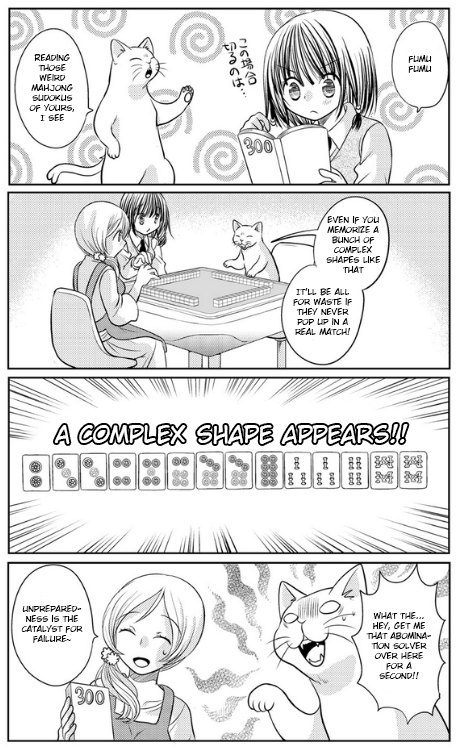
<style>
.page{position:relative;width:461px;height:751px;background:#ffffff}
.page>*{position:absolute;margin:0}
.t1{font:8.3px "WildWordsRoman";color:#000000}
.t2{font:23.3px "WildWordsRoman";color:#ffffff}
.t3{font:8.3px "TimesNewRomanPSMT";color:#000000}
</style>
<div class="page">
<p class="t1" style="left:29px;top:54px;width:46px;height:67px;text-align:center">Reading those weird mahjong sudokus of yours, I see</p>
<p class="t1" style="left:408px;top:55px;width:24px;height:18px;text-align:center">fumu fumu</p>
<p class="t1" style="left:326px;top:216px;width:54px;height:57px;text-align:center">Even if you memorize a bunch of complex shapes like that</p>
<p class="t1" style="left:293px;top:288px;width:59px;height:47px;text-align:center">It'll be all for waste if they never pop up in a real match!</p>
<p class="t2" style="left:54px;top:424px;width:354px;height:20px">A complex shape appears!!</p>
<p class="t1" style="left:21px;top:605px;width:62px;height:38px;text-align:center">Unpreparedness is the catalyst for failure<span class="t3">~</span></p>
<p class="t1" style="left:366px;top:612px;width:65px;height:67px;text-align:center">What the...<br>Hey, get me that abomination solver over here for a second!!</p>
</div>
